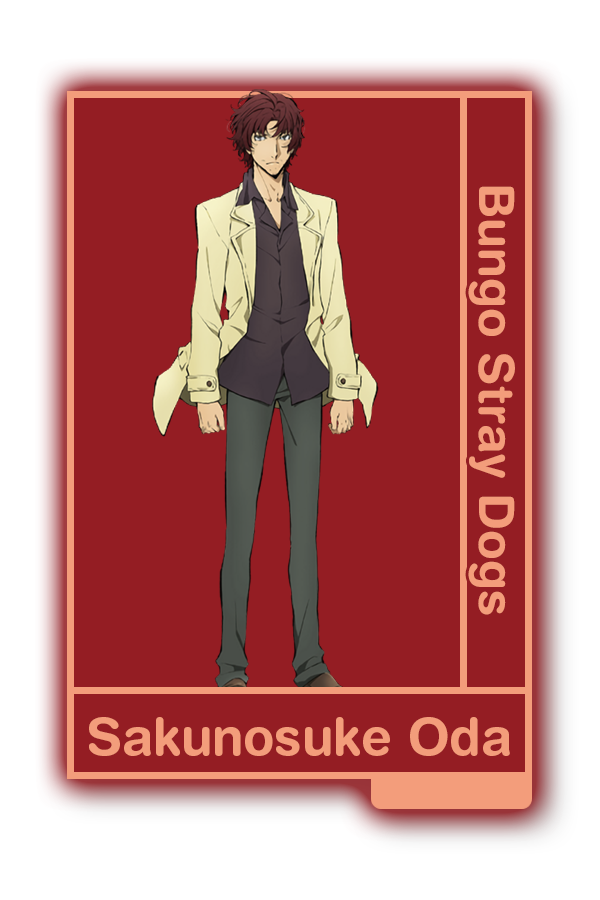
<style>
.page{position:relative;width:600px;height:900px;background:#941d23}
.page>*{position:absolute;margin:0}
.t1{font:48.8px "HelveticaRounded-Bold";color:#f39d7b}
.t2{font:51.1px "HelveticaRounded-Bold";color:#f39d7b}
</style>
<div class="page">
<p class="t1" style="left:468px;top:186px;width:47px;height:429px;rotate:90deg">Bungo Stray Dogs</p>
<p class="t2" style="left:89px;top:717px;width:421px;height:39px">Sakunosuke Oda</p>
</div>
